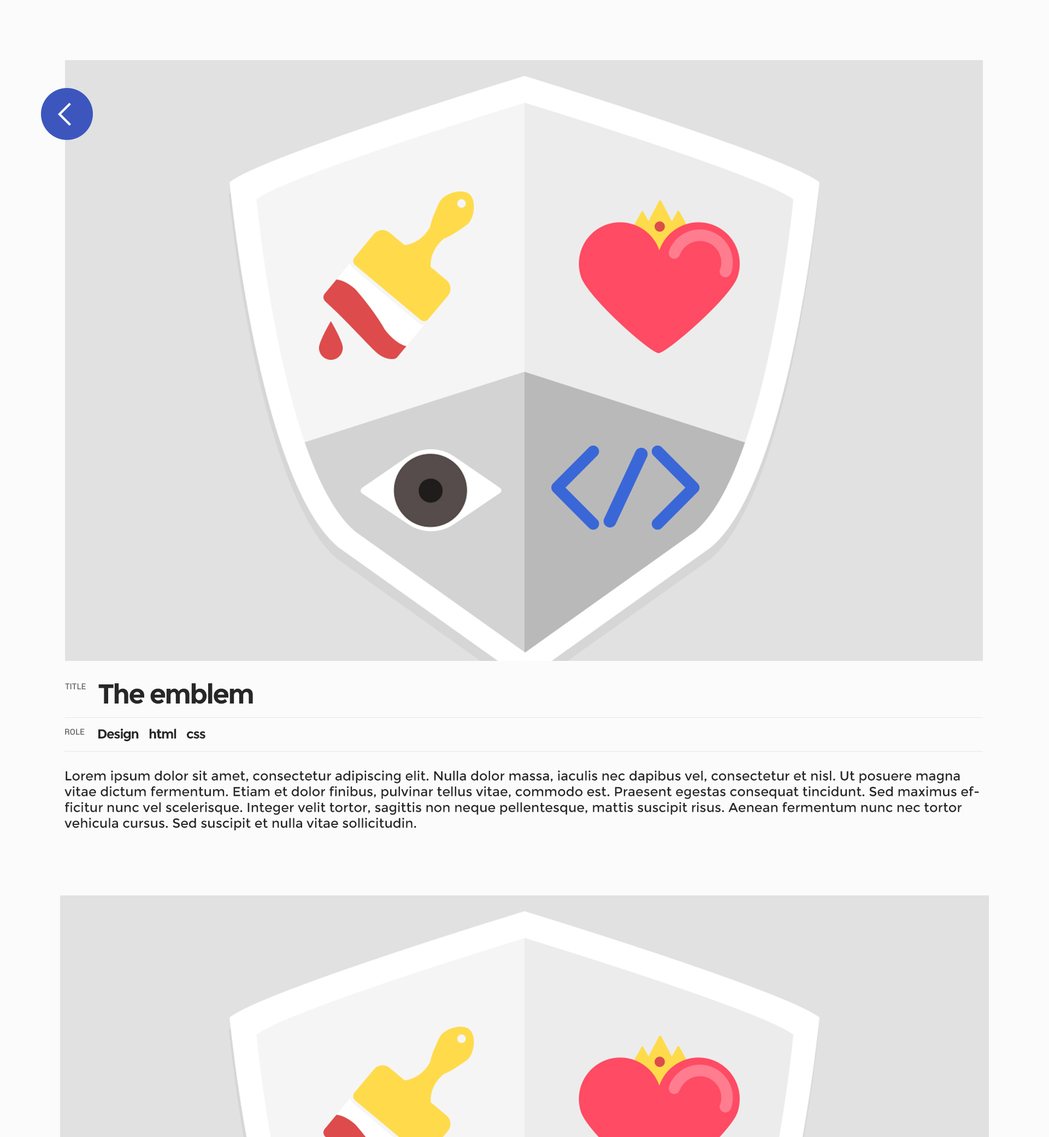
<style>
.page{position:relative;width:1049px;height:1137px;background:#e1e1e1}
.page>*{position:absolute;margin:0}
.t1{font:8.2px "Roboto-Medium";color:#646464;text-transform:uppercase}
.t2{font:27.3px "Montserrat-Bold";letter-spacing:-0.055em;color:#272727}
.t3{font:13.1px "Montserrat-Bold";letter-spacing:-0.055em;color:#272727}
.t4{font:13.1px "Montserrat-Regular";color:#272727}
</style>
<div class="page">
<p class="t1" style="left:65px;top:683px;width:21px;height:6px">Title</p>
<p class="t2" style="left:98px;top:683px;width:155px;height:21px">The emblem</p>
<p class="t1" style="left:65px;top:728px;width:20px;height:7px">role</p>
<p class="t3" style="left:98px;top:728px;width:41px;height:13px">Design</p>
<p class="t3" style="left:149px;top:728px;width:27px;height:11px">html</p>
<p class="t3" style="left:187px;top:731px;width:18px;height:8px">css</p>
<p class="t4" style="left:64px;top:770px;width:915px;height:60px">Lorem ipsum dolor sit amet, consectetur adipiscing elit. Nulla dolor massa, iaculis nec dapibus vel, consectetur et nisl. Ut posuere magna vitae dictum fermentum. Etiam et dolor finibus, pulvinar tellus vitae, commodo est. Praesent egestas consequat tincidunt. Sed maximus efficitur nunc vel scelerisque. Integer velit tortor, sagittis non neque pellentesque, mattis suscipit risus. Aenean fermentum nunc nec tortor vehicula cursus. Sed suscipit et nulla vitae sollicitudin.</p>
</div>
